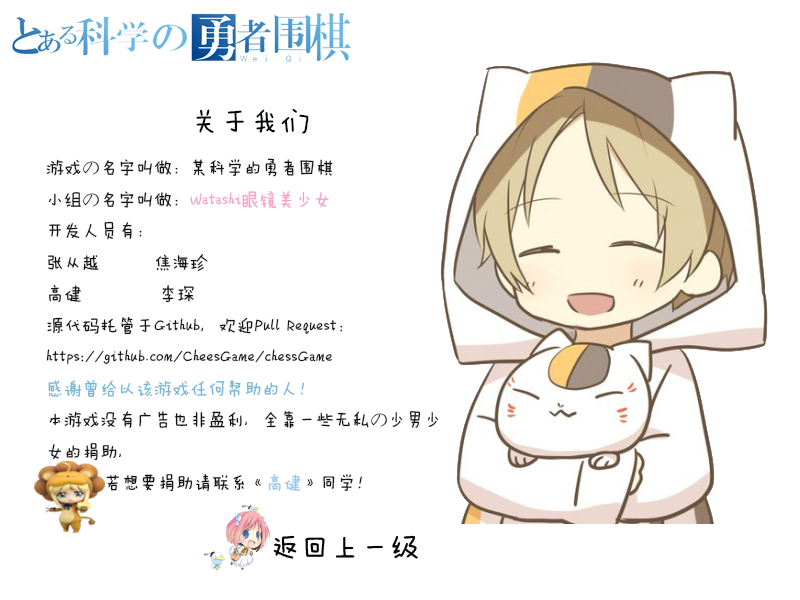
<style>
.page{position:relative;width:800px;height:600px;background:#ffffff}
.page>*{position:absolute;margin:0}
.t1{font:18px "FZMWJW--GB1-0";color:#151012}
.t2{font:30px "MicrosoftYaHei";color:#000303}
.t3{font:30px "FZMWJW--GB1-0";color:#000406}
.t4{font:18px "FZMWJW--GB1-0";color:#f59fc9}
.t5{font:18px "FZMWJW--GB1-0";color:#75b6d7}
.t6{font:18px "FZMWJW--GB1-0";color:#96c6ea}
</style>
<div class="page">
<p class="t1" style="left:46px;top:108px;width:393px;height:384px"><span class="t2">    </span><span class="t3">关于我们<br></span>游戏の名字叫做：某科学的勇者围棋<br>小组の名字叫做：<span class="t4">Watashi眼镜美少女<br></span>开发人员有：<br>张从越  焦海珍<br>高健            李琛<br>源代码托管于Github，欢迎Pull Request：<br>https://github.com/CheesGame/chessGame<br><span class="t5">感谢曾给以该游戏任何帮助的人！<br></span>本游戏没有广告也非盈利，全靠一些无私の少男少女的捐助，<br>         若想要捐助请联系《<span class="t6">高健</span>》同学！</p>
</div>
